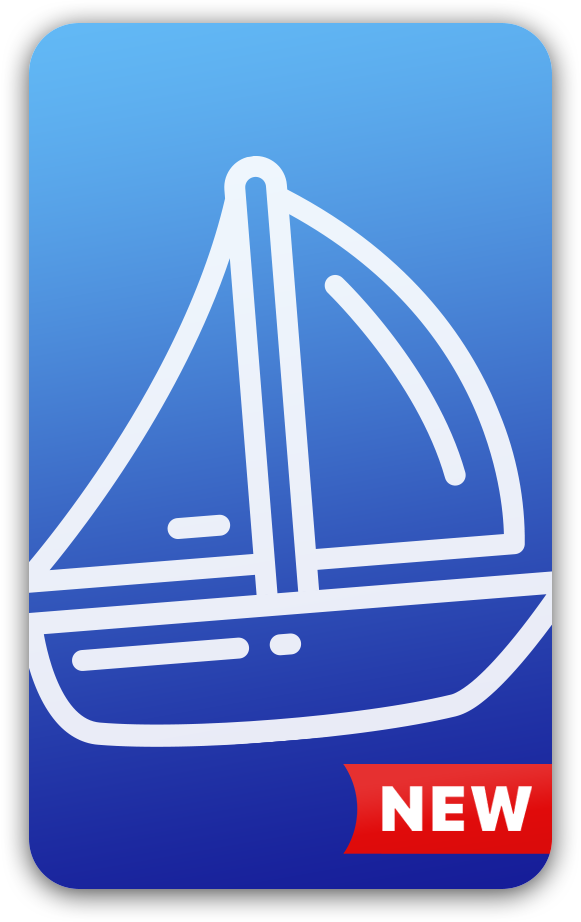
<style>
.page{position:relative;width:581px;height:922px}
.page>*{position:absolute;margin:0}
.t1{font:63px "SFProText-Black";color:#ffffff}
</style>
<div class="page">
<p class="t1" style="left:382px;top:786px;width:150px;height:45px">NEW</p>
</div>
